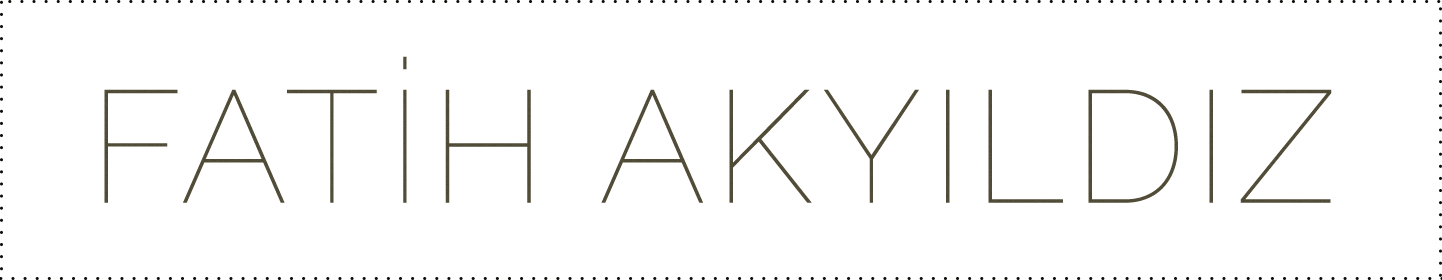
<style>
.page{position:relative;width:1442px;height:280px;background:#ffffff}
.page>*{position:absolute;margin:0}
.t1{font:158.6px "Raleway-Thin";letter-spacing:0.05em;color:#4a4732}
</style>
<div class="page">
<p class="t1" style="left:104px;top:56px;width:1228px;height:147px">FATİH AKYILDIZ</p>
</div>
